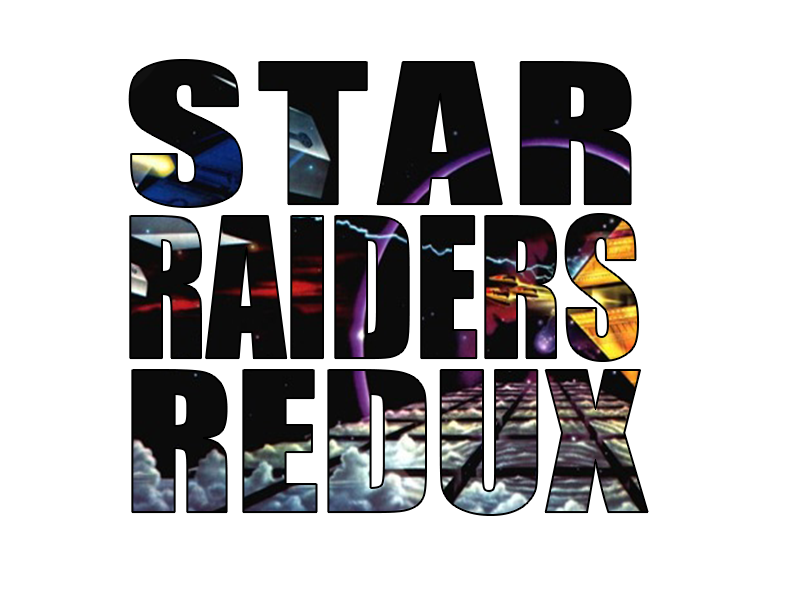
<style>
.page{position:relative;width:792px;height:612px;background:#ffffff}
.page>*{position:absolute;margin:0}
.t1{font:178.8px/154px "Impact";color:#1a1a1a;scale:0.86 1}
.t2{font:178.8px/154px "Impact";letter-spacing:0.045em;color:#1a1a1a;scale:1.34 1}
.t3{font:178.8px/154px "Impact";color:#1a1a1a;scale:1.15 1}
</style>
<div class="page">
<p class="t1" style="left:129px;top:60px;width:519px;height:455px"><span class="t2">STAR<br></span>RAIDERS<br><span class="t3">REDUX</span></p>
</div>
